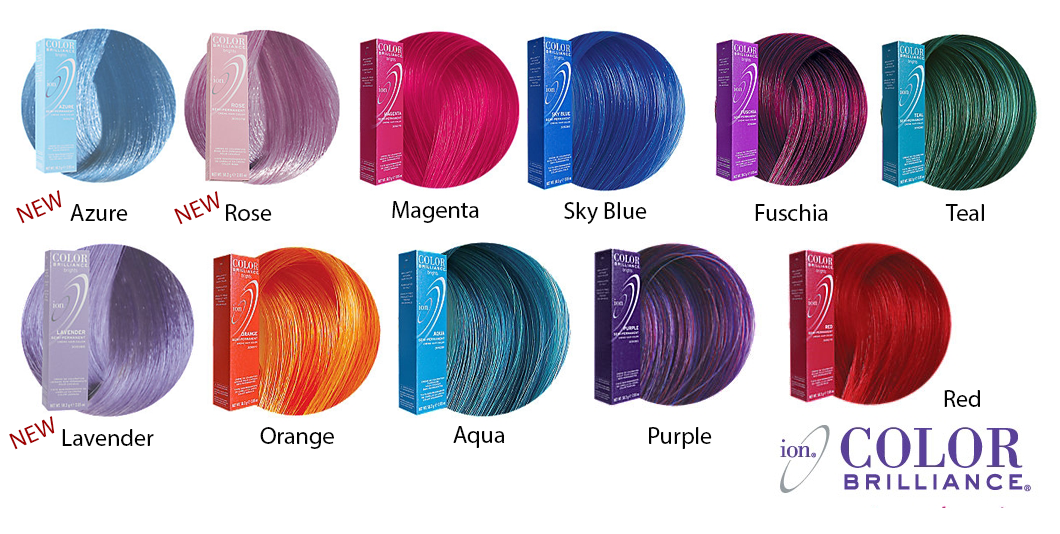
<style>
.page{position:relative;width:1060px;height:534px;background:#ffffff}
.page>*{position:absolute;margin:0}
.t1{font:24px "MyriadPro-Regular";color:#a00000}
.t2{font:24px "MyriadPro-Regular";color:#040404}
</style>
<div class="page">
<p class="t1" style="left:16px;top:190px;width:46px;height:34px;rotate:-24deg">NEW</p>
<p class="t1" style="left:174px;top:191px;width:46px;height:34px;rotate:-24deg">NEW</p>
<p class="t2" style="left:70px;top:204px;width:58px;height:17px">Azure</p>
<p class="t2" style="left:226px;top:204px;width:46px;height:17px">Rose</p>
<p class="t2" style="left:392px;top:201px;width:87px;height:22px">Magenta</p>
<p class="t2" style="left:564px;top:202px;width:83px;height:22px">Sky Blue</p>
<p class="t2" style="left:755px;top:204px;width:73px;height:17px">Fuschia</p>
<p class="t2" style="left:945px;top:204px;width:39px;height:17px">Teal</p>
<p class="t2" style="left:944px;top:390px;width:36px;height:17px">Red</p>
<p class="t1" style="left:9px;top:416px;width:46px;height:34px;rotate:-24deg">NEW</p>
<p class="t2" style="left:62px;top:429px;width:92px;height:17px">Lavender</p>
<p class="t2" style="left:260px;top:427px;width:74px;height:22px">Orange</p>
<p class="t2" style="left:453px;top:426px;width:52px;height:22px">Aqua</p>
<p class="t2" style="left:649px;top:427px;width:63px;height:22px">Purple</p>
</div>
